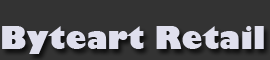
<style>
.page{position:relative;width:270px;height:60px;background:#333333}
.page>*{position:absolute;margin:0}
.t1{font:30px "GillSans-UltraBold";color:#dfdfed}
</style>
<div class="page">
<p class="t1" style="left:2px;top:26px;width:262px;height:28px">Byteart Retail</p>
</div>
